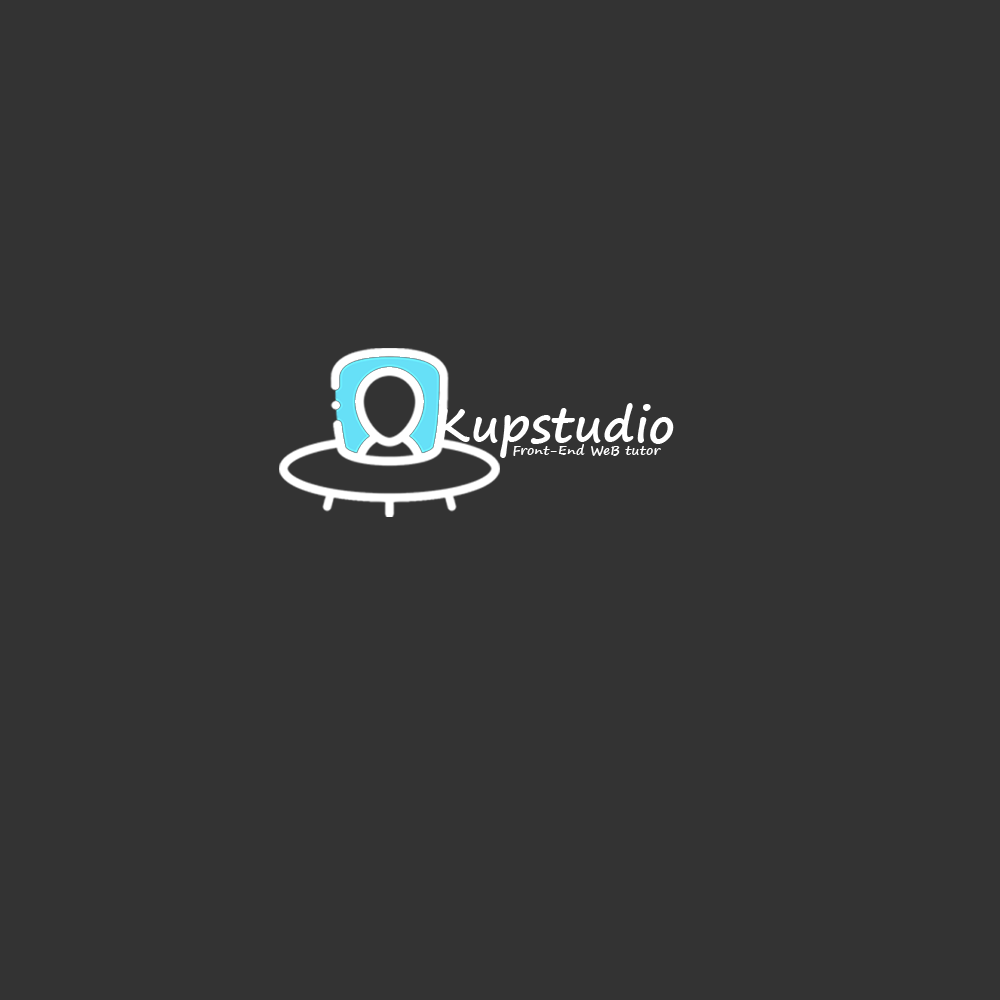
<style>
.page{position:relative;width:1000px;height:1000px;background:#333333}
.page>*{position:absolute;margin:0}
.t1{font:48px "SegoePrint-Bold";color:#ffffff}
.t2{font:48px "InkFree";color:#debb15}
.t3{font:13.3px "SegoePrint-Bold";color:#ffffff}
</style>
<div class="page">
<p class="t1" style="left:438px;top:403px;width:236px;height:55px"><span class="t2"> </span>Kupstudio</p>
<p class="t3" style="left:513px;top:444px;width:148px;height:12px">Front-End WeB tutor</p>
</div>
